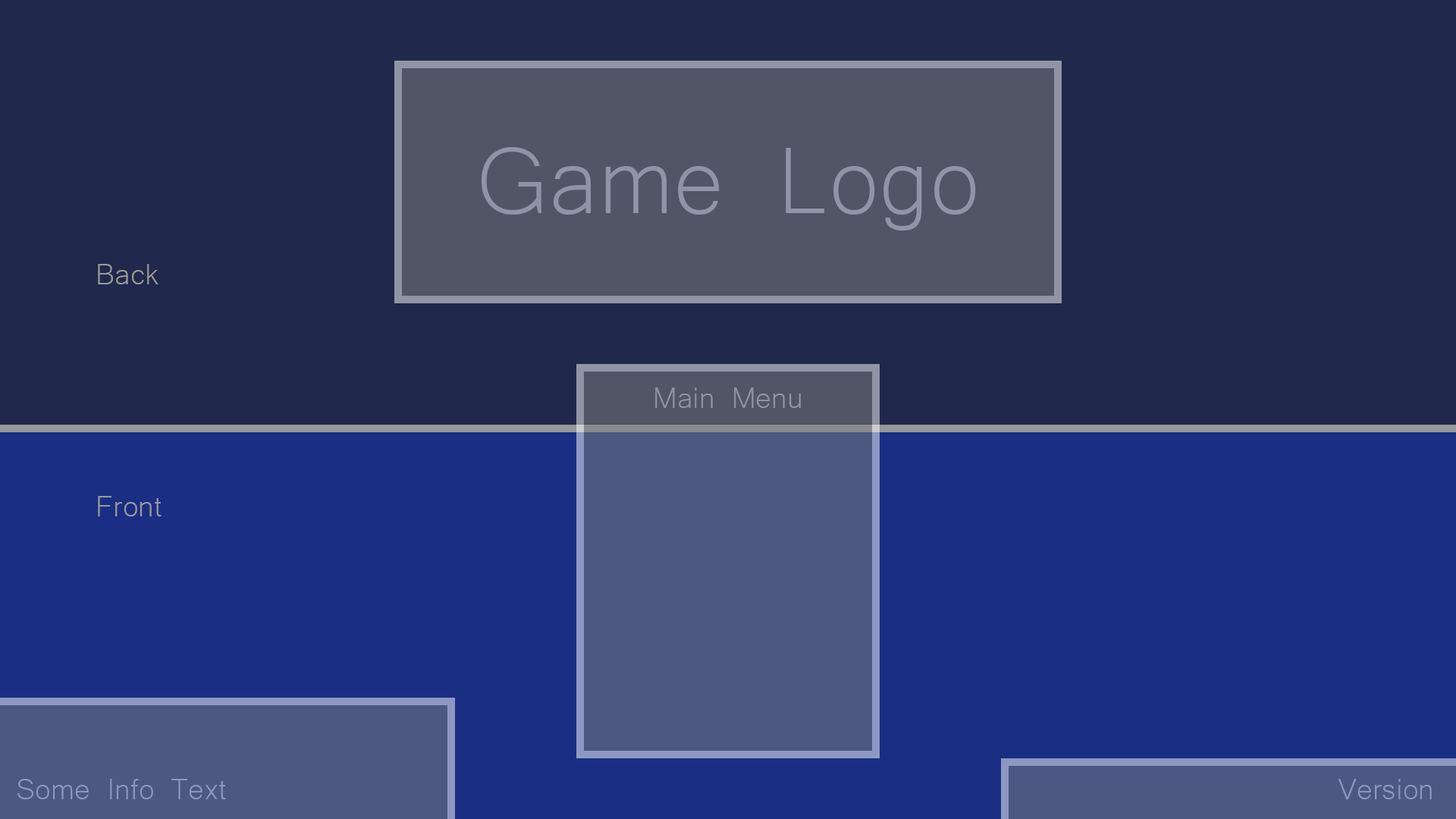
<style>
.page{position:relative;width:1456px;height:819px;background:#20284b}
.page>*{position:absolute;margin:0}
.t1{font:121.3px "Microsoft-Yi-Baiti";color:#9094a6}
.t2{font:37.9px "Microsoft-Yi-Baiti";color:#9a9a9a}
.t3{font:37.9px "Microsoft-Yi-Baiti";color:#9094a6}
.t4{font:37.9px "Microsoft-Yi-Baiti";color:#8d97c2}
</style>
<div class="page">
<p class="t1" style="left:481px;top:147px;width:495px;height:84px">Game Logo</p>
<p class="t2" style="left:98px;top:264px;width:60px;height:20px">Back</p>
<p class="t3" style="left:655px;top:388px;width:146px;height:20px">Main Menu</p>
<p class="t2" style="left:98px;top:496px;width:64px;height:20px">Front</p>
<p class="t4" style="left:17px;top:779px;width:209px;height:20px">Some Info Text</p>
<p class="t4" style="left:1338px;top:779px;width:94px;height:20px">Version</p>
</div>
